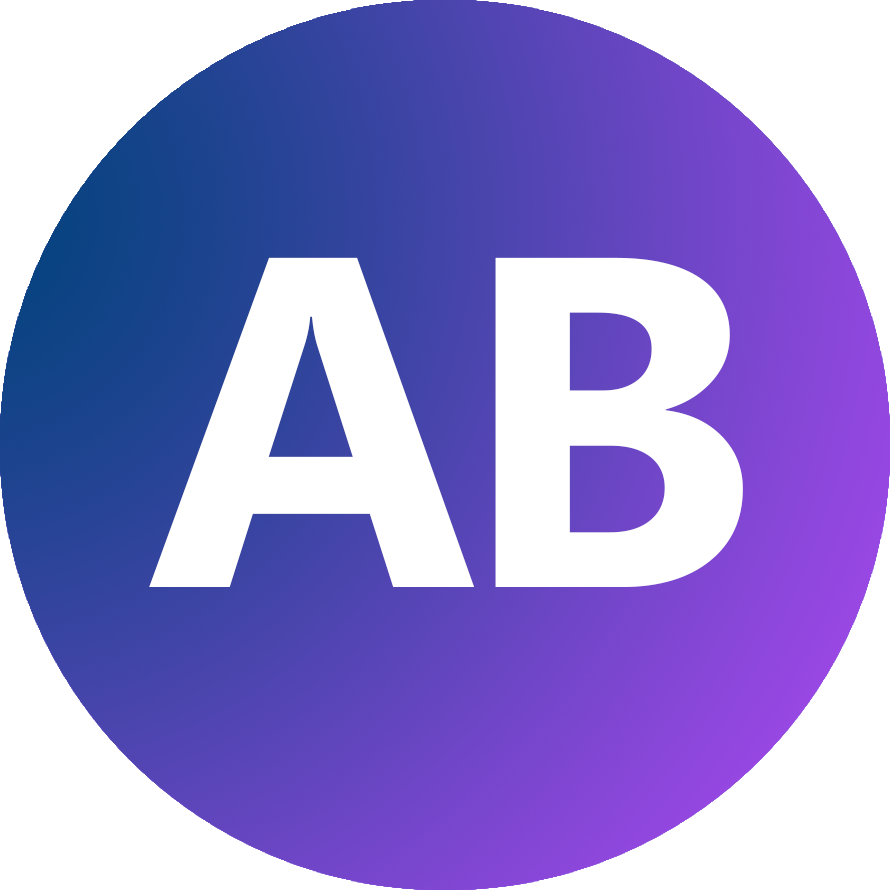
<style>
.page{position:relative;width:890px;height:890px;background:#ffffff}
.page>*{position:absolute;margin:0}
.t1{font:470px "MicrosoftPhagsPa-Bold";letter-spacing:-0.04em;color:#ffffff}
</style>
<div class="page">
<p class="t1" style="left:149px;top:257px;width:594px;height:330px">AB</p>
</div>
